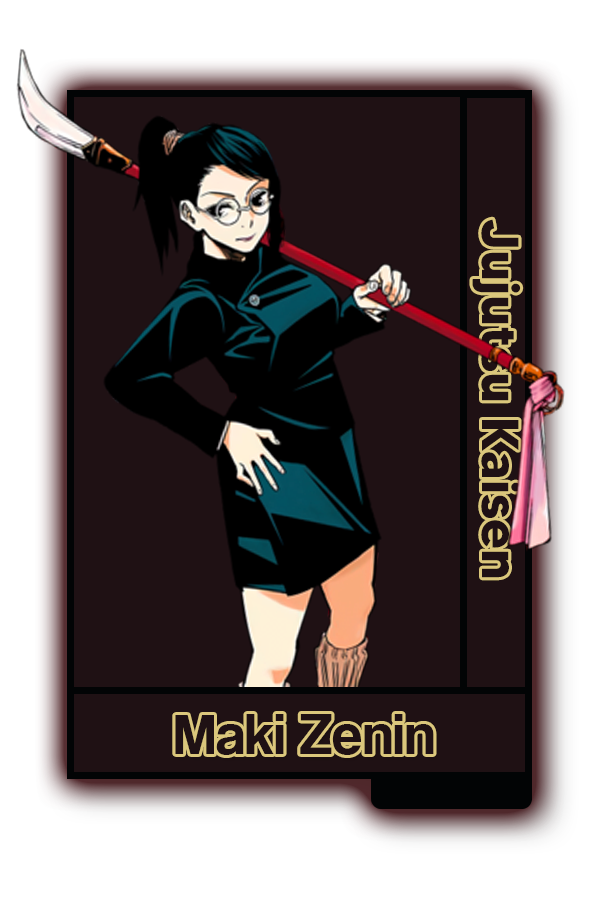
<style>
.page{position:relative;width:600px;height:900px;background:#1f1114}
.page>*{position:absolute;margin:0}
.t1{font:52px "MADETOMMY-Bold";color:#1e1214}
.t2{font:60.3px "CoolveticaRg-Regular";color:#1e1214}
</style>
<div class="page">
<p class="t1" style="left:472px;top:219px;width:49px;height:359px;rotate:90deg">Jujutsu Kaisen</p>
<p class="t2" style="left:175px;top:714px;width:259px;height:41px">Maki Zenin</p>
</div>
